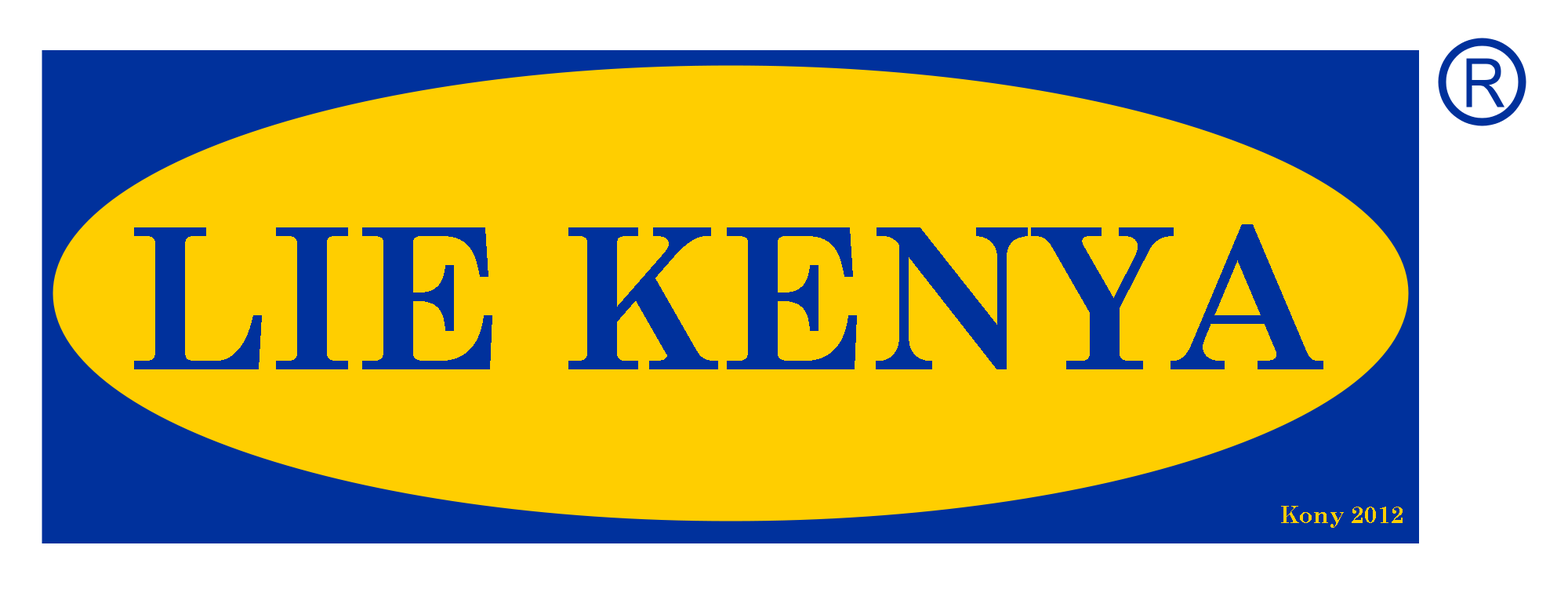
<style>
.page{position:relative;width:1568px;height:596px;background:#ffce00}
.page>*{position:absolute;margin:0}
.t1{font:196px "CenturySchoolbook-Bold";color:#00319c}
.t2{font:23.5px "CenturySchoolbook-Bold";color:#ffce00}
</style>
<div class="page">
<p class="t1" style="left:134px;top:224px;width:1189px;height:145px">LIE KENYA</p>
<p class="t2" style="left:1281px;top:506px;width:122px;height:22px">Kony 2012</p>
</div>
